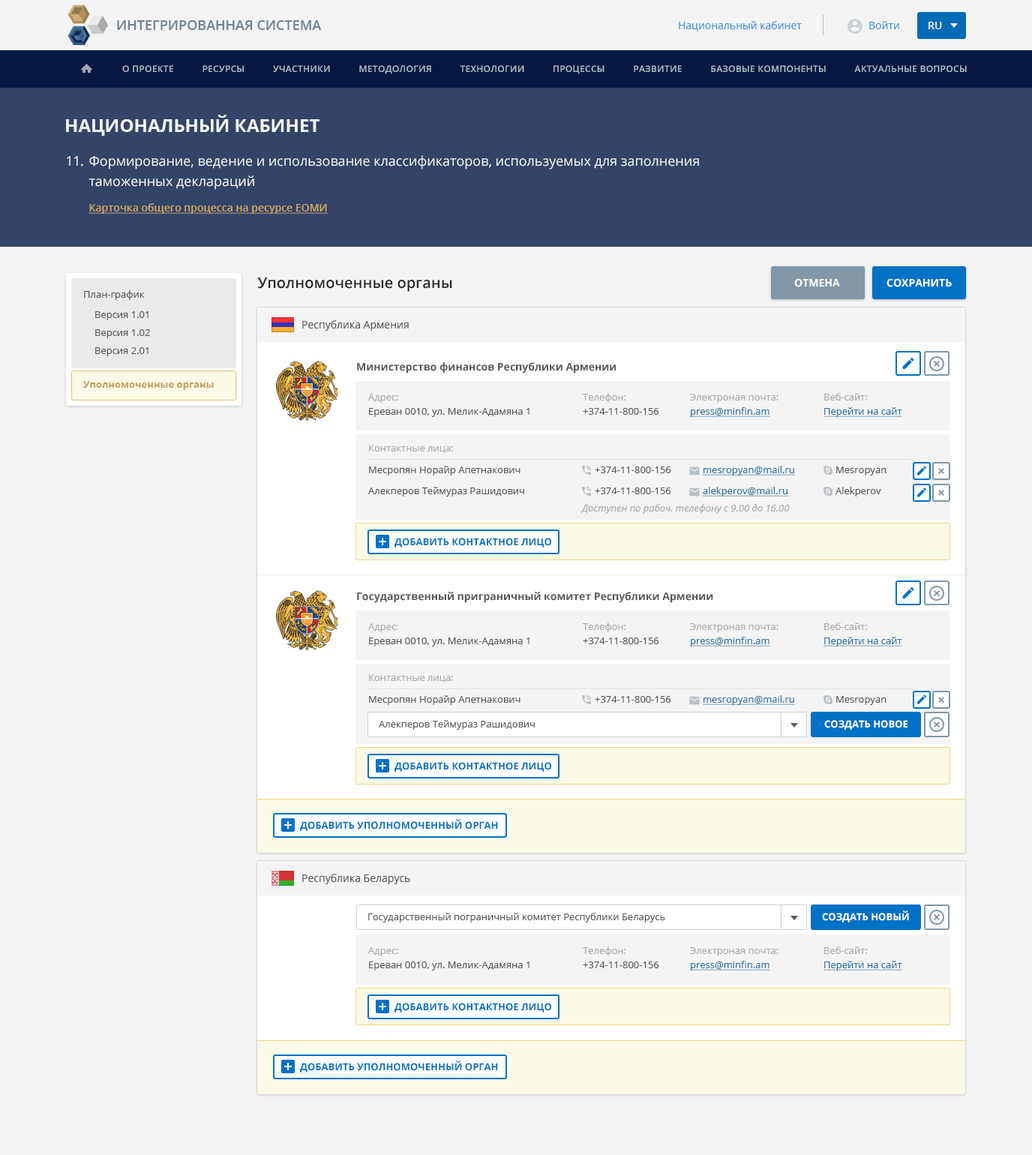
<style>
.page{position:relative;width:1032px;height:1155px;background:#f4f4f4}
.page>*{position:absolute;margin:0}
.t1{font:13.5px "OpenSans-Semibold";color:#6f8294;text-transform:uppercase}
.t2{font:10.5px "OpenSans";color:#4292df}
.t3{font:10.5px "OpenSans-Semibold";color:#f4f4f4}
.t4{font:9px "OpenSans-Semibold";letter-spacing:0.025em;color:#acbdc7;text-transform:uppercase}
.t5{font:18px "OpenSans-Bold";color:#f4f4f4;text-transform:uppercase}
.t6{font:13.5px "OpenSans";letter-spacing:-0.025em;color:#f4f4f4}
.t7{font:13.5px/20.3px "OpenSans";color:#f4f4f4}
.t8{font:10.5px "OpenSans-Semibold";color:#cea663;text-decoration:underline}
.t9{font:15px "OpenSans-Semibold";color:#262626}
.t10{font:10.5px "OpenSans-Bold";color:#ffffff;text-transform:uppercase}
.t11{font:9.8px "OpenSans";color:#595959}
.t12{font:9.8px/18px "OpenSans";color:#595959}
.t13{font:10.5px "OpenSans";color:#595959}
.t14{font:10.5px "OpenSans-Bold";color:#595959}
.t15{font:9.8px "OpenSans-Bold";color:#c6a163}
.t16{font:9.8px "OpenSans";color:#ababab}
.t17{font:9.8px "OpenSans";color:#2b74a1;text-decoration:underline}
.t18{font:9.8px "OpenSans-Italic";color:#ababab}
.t19{font:9.8px "OpenSans-Bold";color:#0072c6;text-transform:uppercase}
.t20{font:9.8px "OpenSans-Bold";color:#ffffff;text-transform:uppercase}
</style>
<div class="page">
<p class="t1" style="left:117px;top:20px;width:204px;height:10px">Интегрированная система</p>
<p class="t2" style="left:679px;top:21px;width:123px;height:11px">Национальный кабинет</p>
<p class="t2" style="left:869px;top:21px;width:30px;height:8px">Войти</p>
<p class="t3" style="left:929px;top:22px;width:13px;height:7px">RU</p>
<p class="t4" style="left:122px;top:65px;width:845px;height:9px">О проекте           Ресурсы           Участники           Методология           Технологии           Процессы           Развитие           Базовые компоненты           Актуальные вопросы</p>
<p class="t5" style="left:66px;top:115px;width:254px;height:21px">Национальный кабинет</p>
<p class="t6" style="left:67px;top:156px;width:16px;height:11px">11.</p>
<p class="t7" style="left:89px;top:155px;width:610px;height:35px">Формирование, ведение и использование классификаторов, используемых для заполнения таможенных деклараций</p>
<p class="t8" style="left:89px;top:203px;width:239px;height:11px">Карточка общего процесса на ресурсе ЕОМИ</p>
<p class="t9" style="left:257px;top:277px;width:195px;height:15px">Уполномоченные органы</p>
<p class="t10" style="left:794px;top:278px;width:46px;height:9px">Отмена</p>
<p class="t10" style="left:887px;top:278px;width:65px;height:9px">Сохранить</p>
<p class="t11" style="left:84px;top:290px;width:61px;height:10px">План-график</p>
<p class="t12" style="left:95px;top:311px;width:55px;height:45px">Версия 1.01<br>Версия 1.02<br>Версия 2.01</p>
<p class="t13" style="left:302px;top:320px;width:107px;height:11px">Республика Армения</p>
<p class="t14" style="left:357px;top:362px;width:260px;height:12px">Министерство финансов Республики Армении</p>
<p class="t15" style="left:83px;top:381px;width:131px;height:9px">Уполномоченные органы</p>
<p class="t16" style="left:368px;top:394px;width:30px;height:9px">Адрес:</p>
<p class="t16" style="left:583px;top:393px;width:43px;height:10px">Телефон:</p>
<p class="t16" style="left:690px;top:394px;width:89px;height:9px">Электроная почта:</p>
<p class="t16" style="left:824px;top:393px;width:44px;height:8px">Веб-сайт:</p>
<p class="t11" style="left:369px;top:408px;width:161px;height:9px">Ереван 0010, ул. Мелик-Адамяна 1</p>
<p class="t11" style="left:583px;top:408px;width:76px;height:7px">+374-11-800-156</p>
<p class="t17" style="left:690px;top:407px;width:80px;height:10px">press@minfin.am</p>
<p class="t17" style="left:824px;top:407px;width:78px;height:10px">Перейти на сайт</p>
<p class="t16" style="left:369px;top:445px;width:84px;height:8px">Контактные лица:</p>
<p class="t11" style="left:369px;top:466px;width:152px;height:10px">Месропян Норайр Апетнакович</p>
<p class="t11" style="left:595px;top:467px;width:76px;height:6px">+374-11-800-156</p>
<p class="t17" style="left:703px;top:466px;width:92px;height:10px">mesropyan@mail.ru</p>
<p class="t11" style="left:836px;top:467px;width:51px;height:9px">Mesropyan</p>
<p class="t11" style="left:368px;top:487px;width:156px;height:10px">Алекперов Теймураз Рашидович</p>
<p class="t11" style="left:595px;top:488px;width:76px;height:6px">+374-11-800-156</p>
<p class="t17" style="left:703px;top:487px;width:85px;height:10px">alekperov@mail.ru</p>
<p class="t11" style="left:836px;top:487px;width:45px;height:10px">Alekperov</p>
<p class="t18" style="left:581px;top:504px;width:209px;height:10px">Доступен по рабоч. телефону с 9.00 до 16.00</p>
<p class="t19" style="left:395px;top:538px;width:156px;height:10px">Добавить контактное лицо</p>
<p class="t14" style="left:357px;top:592px;width:356px;height:11px">Государственный приграничный комитет Республики Армении</p>
<p class="t16" style="left:368px;top:623px;width:30px;height:9px">Адрес:</p>
<p class="t16" style="left:583px;top:623px;width:43px;height:9px">Телефон:</p>
<p class="t16" style="left:690px;top:623px;width:89px;height:9px">Электроная почта:</p>
<p class="t16" style="left:824px;top:623px;width:44px;height:7px">Веб-сайт:</p>
<p class="t11" style="left:369px;top:638px;width:161px;height:9px">Ереван 0010, ул. Мелик-Адамяна 1</p>
<p class="t11" style="left:583px;top:638px;width:76px;height:6px">+374-11-800-156</p>
<p class="t17" style="left:690px;top:637px;width:80px;height:10px">press@minfin.am</p>
<p class="t17" style="left:824px;top:637px;width:78px;height:10px">Перейти на сайт</p>
<p class="t16" style="left:369px;top:674px;width:84px;height:9px">Контактные лица:</p>
<p class="t11" style="left:369px;top:695px;width:152px;height:10px">Месропян Норайр Апетнакович</p>
<p class="t11" style="left:595px;top:696px;width:76px;height:7px">+374-11-800-156</p>
<p class="t17" style="left:703px;top:695px;width:92px;height:10px">mesropyan@mail.ru</p>
<p class="t11" style="left:836px;top:696px;width:51px;height:9px">Mesropyan</p>
<p class="t11" style="left:379px;top:720px;width:156px;height:10px">Алекперов Теймураз Рашидович</p>
<p class="t20" style="left:824px;top:720px;width:84px;height:10px">Создать новое</p>
<p class="t19" style="left:395px;top:762px;width:156px;height:10px">Добавить контактное лицо</p>
<p class="t19" style="left:300px;top:819px;width:198px;height:12px">Добавить уполномоченный орган</p>
<p class="t13" style="left:302px;top:874px;width:108px;height:10px">Республика Беларусь</p>
<p class="t11" style="left:368px;top:913px;width:297px;height:10px">Государственный пограничный комитет Республики Беларусь</p>
<p class="t20" style="left:822px;top:911px;width:87px;height:12px">Создать новый</p>
<p class="t16" style="left:368px;top:947px;width:30px;height:9px">Адрес:</p>
<p class="t16" style="left:583px;top:947px;width:43px;height:9px">Телефон:</p>
<p class="t16" style="left:690px;top:947px;width:89px;height:9px">Электроная почта:</p>
<p class="t16" style="left:824px;top:947px;width:44px;height:7px">Веб-сайт:</p>
<p class="t11" style="left:369px;top:962px;width:161px;height:9px">Ереван 0010, ул. Мелик-Адамяна 1</p>
<p class="t11" style="left:583px;top:962px;width:76px;height:6px">+374-11-800-156</p>
<p class="t17" style="left:690px;top:961px;width:80px;height:10px">press@minfin.am</p>
<p class="t17" style="left:824px;top:961px;width:78px;height:10px">Перейти на сайт</p>
<p class="t19" style="left:395px;top:1003px;width:156px;height:10px">Добавить контактное лицо</p>
<p class="t19" style="left:300px;top:1061px;width:198px;height:12px">Добавить уполномоченный орган</p>
</div>
